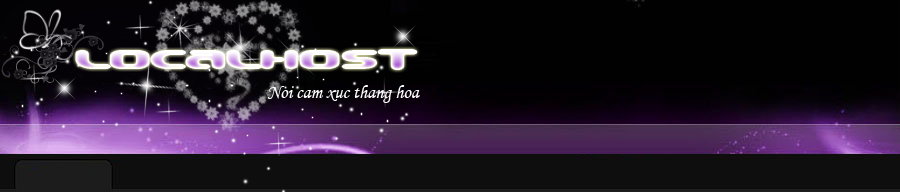
<style>
.page{position:relative;width:900px;height:192px;background:#010101}
.page>*{position:absolute;margin:0}
.t1{font:48px "Beware"}
.t2{font:18.7px "MonotypeCorsiva";color:#ffffff}
</style>
<div class="page">
<p class="t1" style="left:76px;top:50px;width:341px;height:19px">localhost</p>
<p class="t2" style="left:267px;top:85px;width:153px;height:18px">Noi cam xuc thang hoa</p>
</div>
